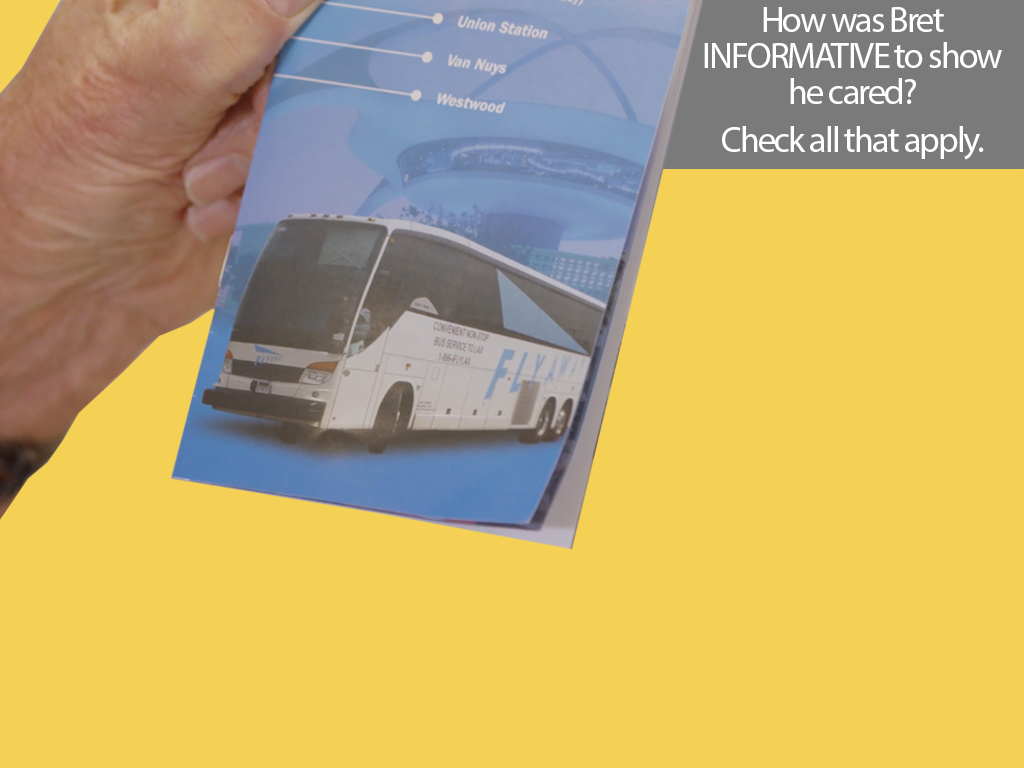
<style>
.page{position:relative;width:1024px;height:768px;background:#f4d154}
.page>*{position:absolute;margin:0}
.t1{font:36px/36px "MyriadPro-Regular";letter-spacing:-0.05em;color:#ffffff}
.t2{font:36px/48px "MyriadPro-Regular";letter-spacing:-0.05em;color:#ffffff}
</style>
<div class="page">
<p class="t1" style="left:704px;top:7px;width:298px;height:153px;text-align:center">How was Bret INFORMATIVE to show he cared?<br><span class="t2">Check all that apply.</span></p>
</div>
